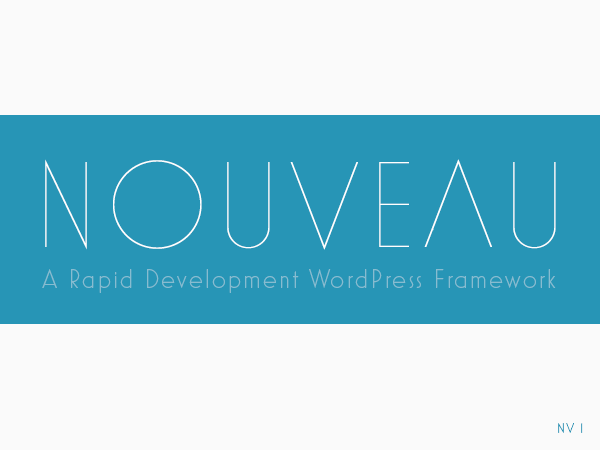
<style>
.page{position:relative;width:600px;height:450px;background:#fafafa}
.page>*{position:absolute;margin:0}
.t1{font:124px "MostraNuova-Thin";color:#ffffff}
.t2{font:26.6px "MostraNuova-Light";letter-spacing:0.06em;color:#87bcd0}
.t3{font:14px "MostraNuova-Light";letter-spacing:0.06em;color:#2795b6}
</style>
<div class="page">
<p class="t1" style="left:45px;top:159px;width:511px;height:91px">NOUVEAU</p>
<p class="t2" style="left:42px;top:269px;width:514px;height:24px">A Rapid Development WordPress Framework</p>
<p class="t3" style="left:558px;top:423px;width:25px;height:10px">NV 1</p>
</div>
